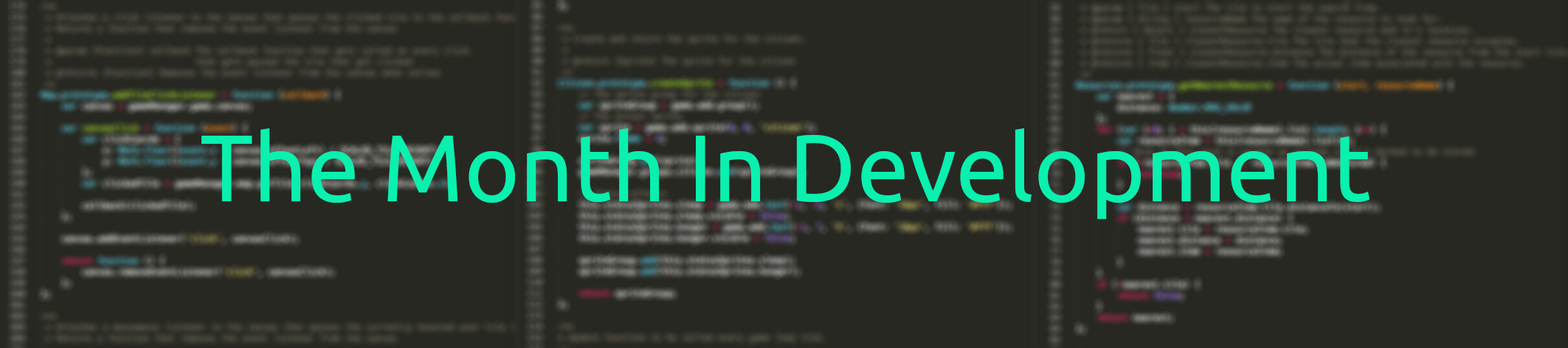
<style>
.page{position:relative;width:1568px;height:348px;background:#272822}
.page>*{position:absolute;margin:0}
.t1{font:94.4px "Ubuntu";color:#0af0af}
</style>
<div class="page">
<p class="t1" style="left:201px;top:128px;width:1169px;height:91px">The Month In Development</p>
</div>
